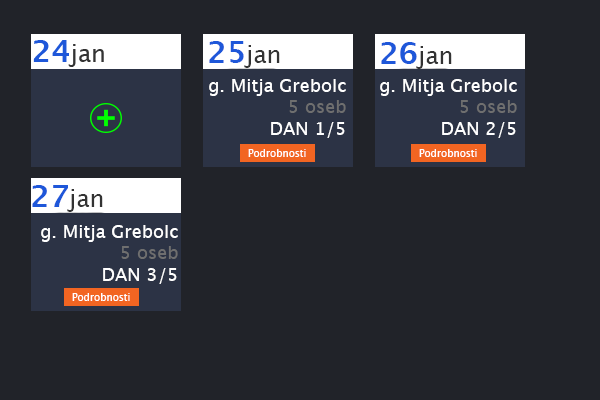
<style>
.page{position:relative;width:600px;height:400px;background:#212329}
.page>*{position:absolute;margin:0}
.t1{font:24px "LucidaSans";color:#333333}
.t2{font:30px "LucidaSans-Demi";color:#1e57d9}
.t3{font:18px "LucidaSans";color:#ffffff}
.t4{font:18px "LucidaSans";color:#6f6f6f}
.t5{font:10px "LucidaSans";color:#ffffff}
</style>
<div class="page">
<p class="t1" style="left:209px;top:41px;width:71px;height:27px"><span class="t2">25</span>jan</p>
<p class="t1" style="left:381px;top:42px;width:71px;height:27px"><span class="t2">26</span>jan</p>
<p class="t3" style="left:209px;top:79px;width:137px;height:59px;text-align:right">g. Mitja Grebolc<br><span class="t4">5 oseb<br></span>DAN 1/5</p>
<p class="t3" style="left:380px;top:79px;width:137px;height:59px;text-align:right">g. Mitja Grebolc<br><span class="t4">5 oseb<br></span>DAN 2/5</p>
<p class="t5" style="left:248px;top:149px;width:58px;height:8px">Podrobnosti</p>
<p class="t5" style="left:419px;top:149px;width:58px;height:8px">Podrobnosti</p>
<p class="t1" style="left:32px;top:185px;width:71px;height:27px"><span class="t2">27</span>jan</p>
<p class="t3" style="left:41px;top:225px;width:137px;height:59px;text-align:right">g. Mitja Grebolc<br><span class="t4">5 oseb<br></span>DAN 3/5</p>
<p class="t5" style="left:72px;top:293px;width:58px;height:8px">Podrobnosti</p>
</div>
